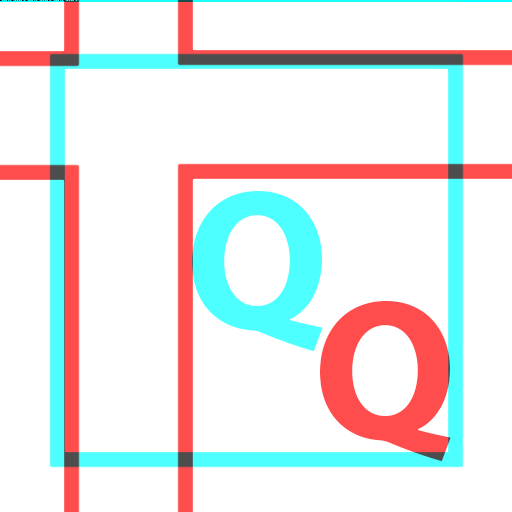
<style>
.page{position:relative;width:512px;height:512px;background:#ffffff}
.page>*{position:absolute;margin:0}
.t1{font:200px "MyriadPro-Bold";color:#4dffff}
</style>
<div class="page">
<p class="t1" style="left:192px;top:188px;width:131px;height:162px">Q</p>
</div>
